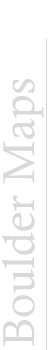
<style>
.page{position:relative;width:50px;height:350px;background:#ffffff}
.page>*{position:absolute;margin:0}
.t1{font:45px "CalistoMT";color:#d9d9d9}
</style>
<div class="page">
<p class="t1" style="left:2px;top:79px;width:42px;height:267px;rotate:-90deg">Boulder Maps</p>
</div>
